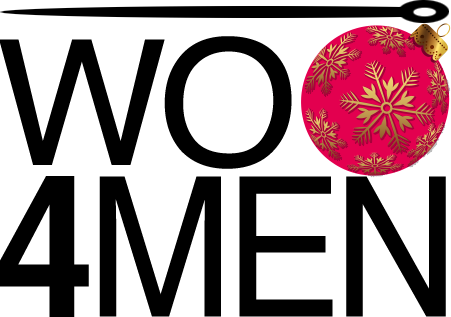
<style>
.page{position:relative;width:451px;height:317px;background:#ffffff}
.page>*{position:absolute;margin:0}
.t1{font:174.7px "Helvetica";letter-spacing:-0.05em;color:#000000;text-transform:uppercase;scale:1.04 1}
.t2{font:199.9px "Helvetica-Bold";color:#000000;text-transform:uppercase;scale:0.9 1}
.t3{font:194.8px "Helvetica";letter-spacing:-0.05em;color:#000000;text-transform:uppercase;scale:0.9 1}
</style>
<div class="page">
<p class="t1" style="left:0px;top:36px;width:292px;height:133px">wo</p>
<p class="t2" style="left:0px;top:176px;width:89px;height:141px">4</p>
<p class="t3" style="left:99px;top:176px;width:347px;height:141px">men</p>
</div>
